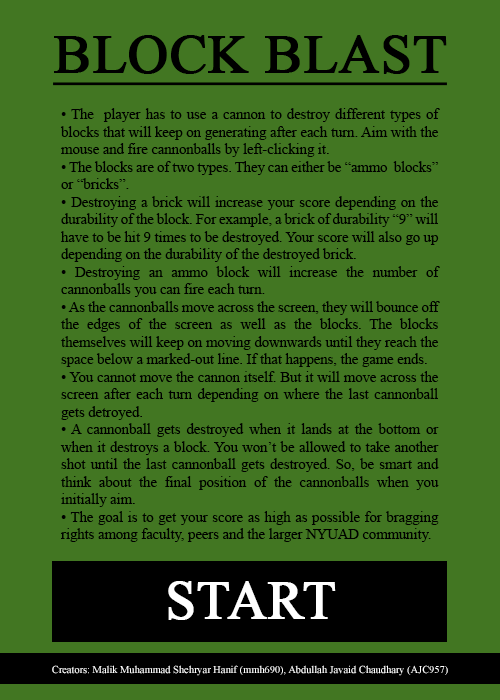
<style>
.page{position:relative;width:500px;height:700px;background:#427622}
.page>*{position:absolute;margin:0}
.t1{font:55.4px "TimesNewRomanPSMT";color:#000000;font-weight:bold;text-decoration:underline}
.t2{font:14.6px "TimesNewRomanPSMT";color:#000000}
.t3{font:54.2px "TimesNewRomanPSMT";color:#ffffff;font-weight:bold}
.t4{font:10.4px "TimesNewRomanPSMT";color:#ffffff}
</style>
<div class="page">
<p class="t1" style="left:53px;top:35px;width:394px;height:51px">BLOCK BLAST</p>
<p class="t2" style="left:60px;top:108px;width:380px;height:434px;text-align:justify">• The  player has to use a cannon to destroy different types of blocks that will keep on generating after each turn. Aim with the mouse and fire cannonballs by left-clicking it.<br>• The blocks are of two types. They can either be “ammo  blocks” or “bricks”.<br>• Destroying a brick will increase your score depending on the durability of the block. For example, a brick of durability “9” will have to be hit 9 times to be destroyed. Your score will also go up depending on the durability of the destroyed brick.<br>• Destroying an ammo block will increase the number of cannonballs you can fire each turn. <br>• As the cannonballs move across the screen, they will bounce off the edges of the screen as well as the blocks. The blocks themselves will keep on moving downwards until they reach the space below a marked-out line. If that happens, the game ends.<br>• You cannot move the cannon itself. But it will move across the screen after each turn depending on where the last cannonball gets detroyed.<br>• A cannonball gets destroyed when it lands at the bottom or when it destroys a block. You won’t be allowed to take another shot until the last cannonball gets destroyed. So, be smart and think about the final position of the cannonballs when you initially aim.<br>• The goal is to get your score as high as possible for bragging rights among faculty, peers and the larger NYUAD community.</p>
<p class="t3" style="left:168px;top:581px;width:168px;height:39px">START</p>
<p class="t4" style="left:52px;top:665px;width:396px;height:11px">Creators: Malik Muhammad Shehryar Hanif (mmh690), Abdullah Javaid Chaudhary (AJC957)</p>
</div>
